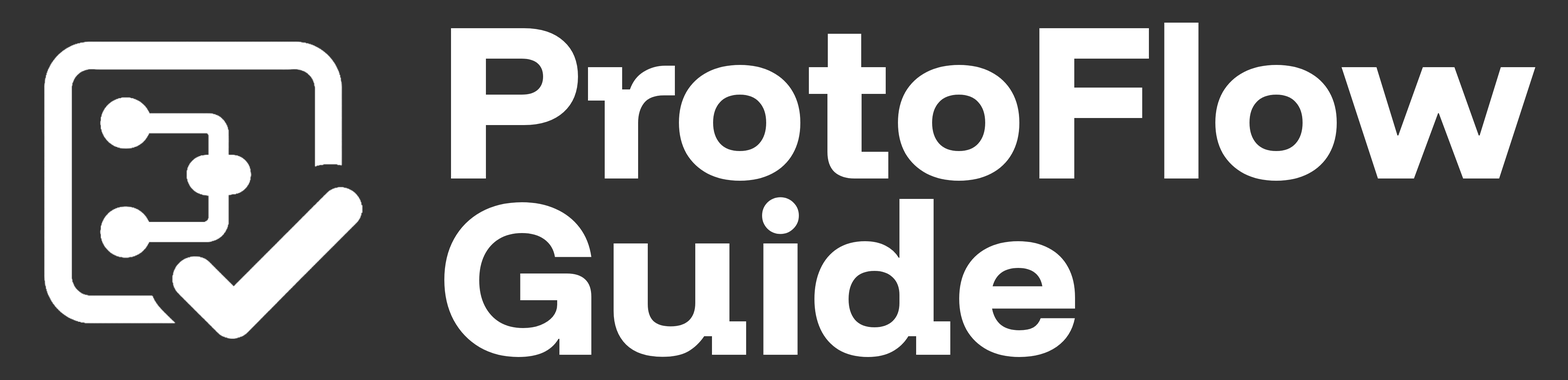
<style>
.page{position:relative;width:1568px;height:380px;background:#333333}
.page>*{position:absolute;margin:0}
.t1{font:222.7px/176.3px "FunnelDisplayLight-undefined";color:#ffffff}
</style>
<div class="page">
<p class="t1" style="left:444px;top:23px;width:1091px;height:334px">ProtoFlow<br>Guide</p>
</div>
